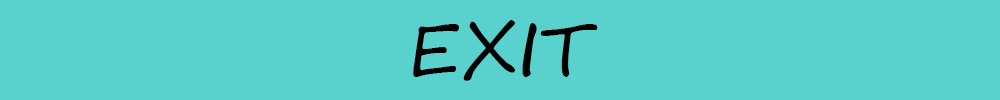
<style>
.page{position:relative;width:1000px;height:100px;background:#59d2ce}
.page>*{position:absolute;margin:0}
.t1{font:74.4px "SegoeScript";color:#000000}
</style>
<div class="page">
<p class="t1" style="left:413px;top:20px;width:185px;height:61px">EXIT</p>
</div>
